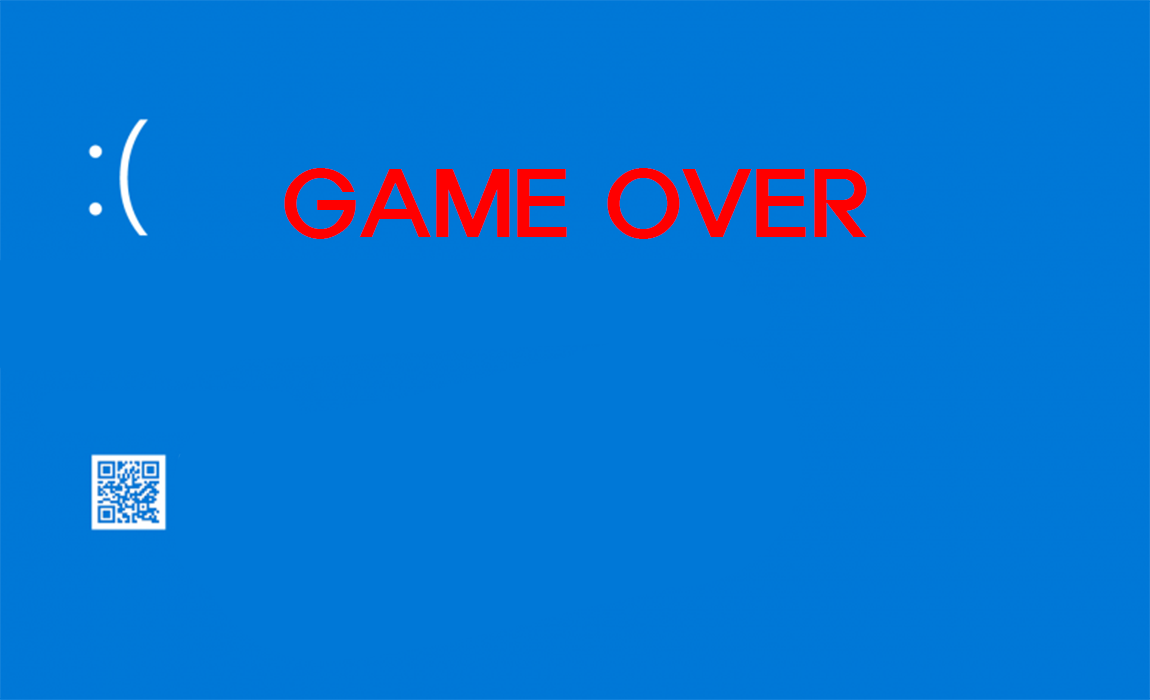
<style>
.page{position:relative;width:1150px;height:700px;background:#0078d7}
.page>*{position:absolute;margin:0}
.t1{font:86.6px "ExpoM-HM";color:#ff0000}
</style>
<div class="page">
<p class="t1" style="left:284px;top:168px;width:583px;height:71px">GAME OVER</p>
</div>
